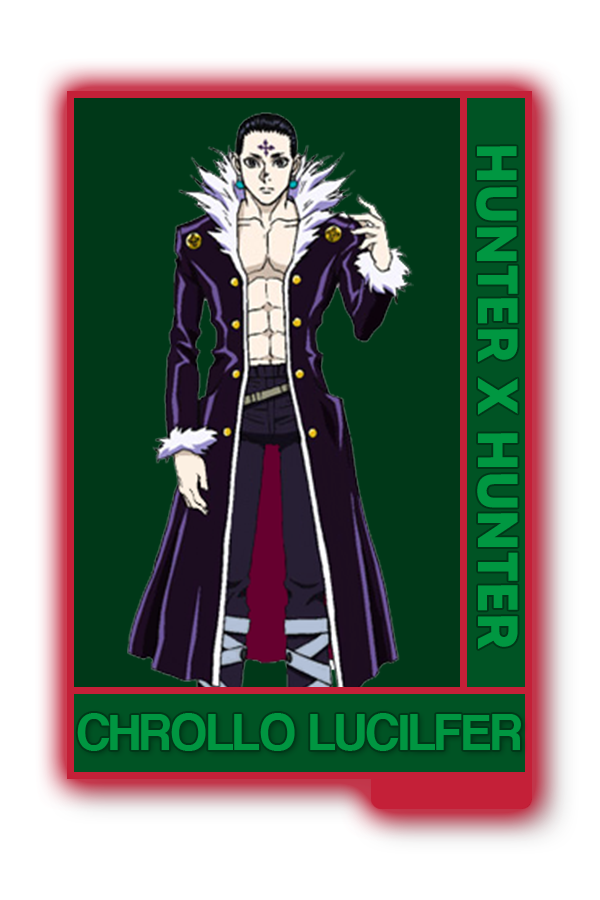
<style>
.page{position:relative;width:600px;height:900px;background:#003818}
.page>*{position:absolute;margin:0}
.t1{font:56.5px "MADETOMMY-Bold";color:#009741}
.t2{font:53.2px "CoolveticaRg-Regular";color:#009641}
</style>
<div class="page">
<p class="t1" style="left:476px;top:146px;width:42px;height:503px;rotate:90deg">HUNTER X HUNTER</p>
<p class="t2" style="left:77px;top:713px;width:444px;height:38px">CHROLLO LUCILFER</p>
</div>
